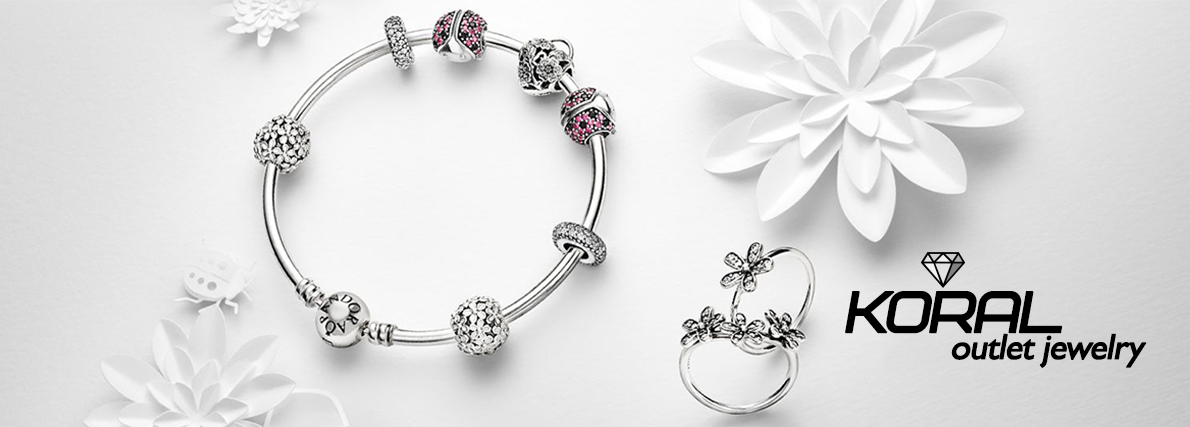
<style>
.page{position:relative;width:1190px;height:427px}
.page>*{position:absolute;margin:0}
.t1{font:58px "Bicubik";letter-spacing:-0.05em;color:#000000;font-weight:bold;font-style:italic}
.t2{font:36px "GillSansMT";letter-spacing:-0.05em;color:#000000;font-weight:bold;font-style:italic}
</style>
<div class="page">
<p class="t1" style="left:845px;top:291px;width:218px;height:43px">KORAL</p>
<p class="t2" style="left:951px;top:333px;width:196px;height:35px">outlet jewelry</p>
</div>
